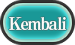
<style>
.page{position:relative;width:75px;height:45px}
.page>*{position:absolute;margin:0}
.t1{font:17px "RyuminPro-ExBold";letter-spacing:-0.08em;color:#fdfbf9}
</style>
<div class="page">
<p class="t1" style="left:9px;top:17px;width:58px;height:13px">Kembali</p>
</div>
